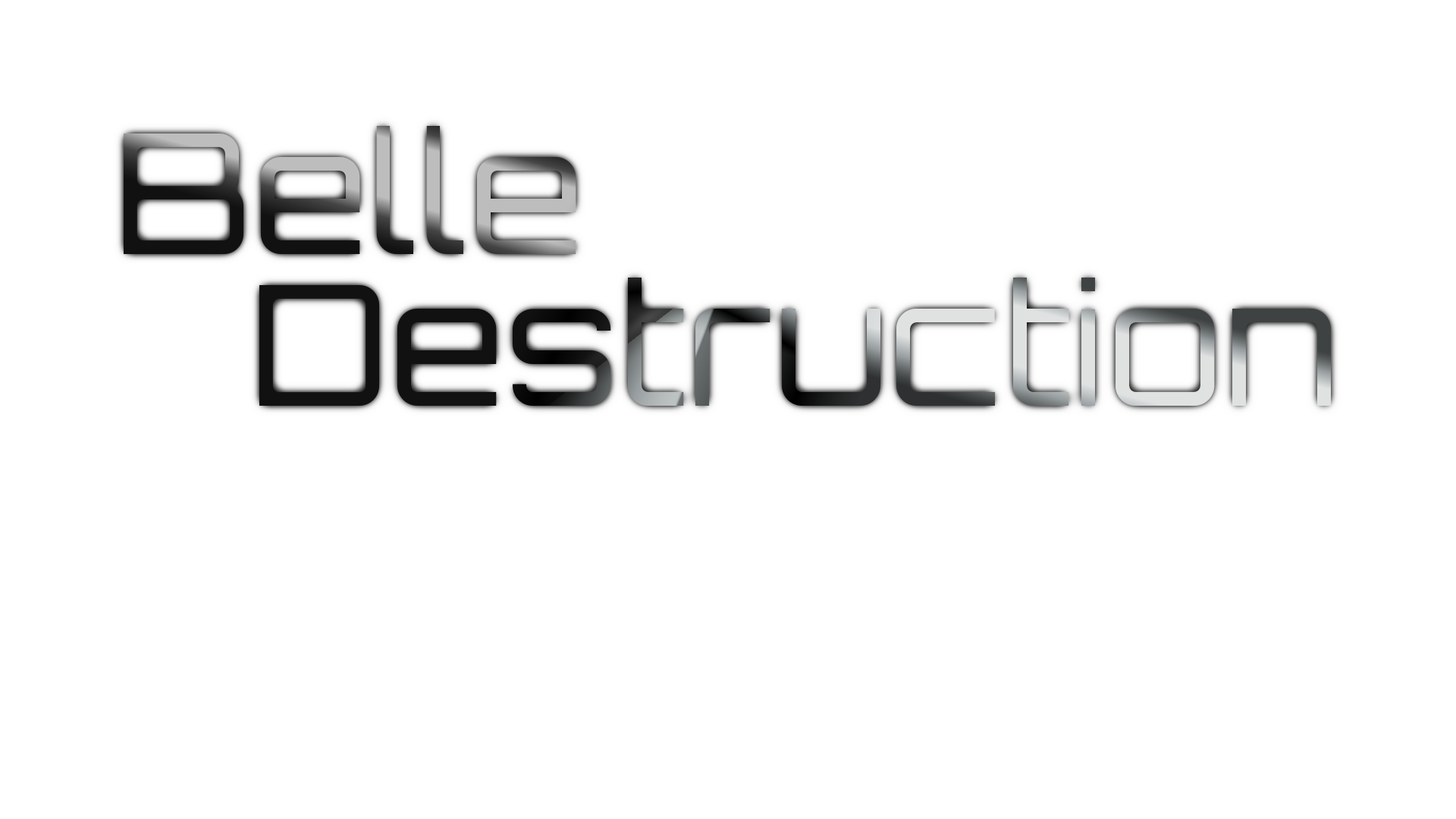
<style>
.page{position:relative;width:1456px;height:819px;background:#ffffff}
.page>*{position:absolute;margin:0}
.t1{font:166.8px/151.7px "Orbitron-Light"}
</style>
<div class="page">
<p class="t1" style="left:124px;top:126px;width:1207px;height:280px">Belle <br>   Destruction</p>
</div>
